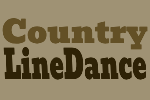
<style>
.page{position:relative;width:150px;height:100px;background:#9f9274}
.page>*{position:absolute;margin:0}
.t1{font:31.4px "Bevan-Regular";color:#635026}
.t2{font:40.4px "Bevan-Regular";color:#2e2206;scale:0.59 1}
</style>
<div class="page">
<p class="t1" style="left:2px;top:18px;width:146px;height:32px">Country</p>
<p class="t2" style="left:3px;top:47px;width:143px;height:33px">LineDance</p>
</div>
